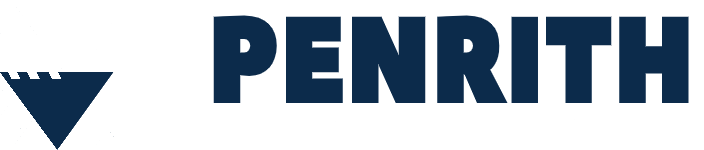
<style>
.page{position:relative;width:704px;height:150px;background:#ffffff}
.page>*{position:absolute;margin:0}
.t1{font:123.1px "PeaceSans";color:#0c2b4b;scale:0.83 1}
</style>
<div class="page">
<p class="t1" style="left:213px;top:15px;width:476px;height:88px">PENRITH</p>
</div>
